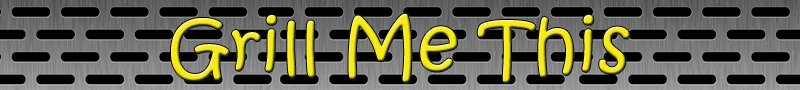
<style>
.page{position:relative;width:800px;height:90px}
.page>*{position:absolute;margin:0}
.t1{font:72px "KristenITC-Regular"}
</style>
<div class="page">
<p class="t1" style="left:171px;top:13px;width:459px;height:70px">Grill Me This</p>
</div>
